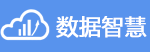
<style>
.page{position:relative;width:150px;height:52px;background:#5893ed}
.page>*{position:absolute;margin:0}
.t1{font:22px "MicrosoftYaHei";color:#ffffff;font-weight:bold}
</style>
<div class="page">
<p class="t1" style="left:56px;top:16px;width:91px;height:22px">数据智慧</p>
</div>
